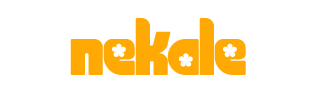
<style>
.page{position:relative;width:320px;height:100px;background:#ffffff}
.page>*{position:absolute;margin:0}
.t1{font:72px "Chick";color:#ffa904}
</style>
<div class="page">
<p class="t1" style="left:70px;top:18px;width:176px;height:57px">nekale</p>
</div>
